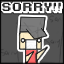
<style>
.page{position:relative;width:64px;height:64px;background:#535353}
.page>*{position:absolute;margin:0}
.t1{font:12px "KarmaticArcade";color:#ffffff}
</style>
<div class="page">
<p class="t1" style="left:1px;top:1px;width:62px;height:13px">sorry!!</p>
</div>
